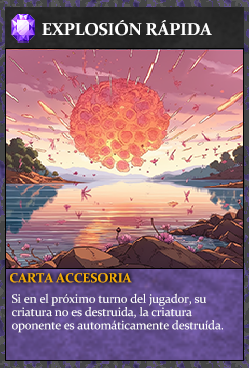
<style>
.page{position:relative;width:249px;height:368px}
.page>*{position:absolute;margin:0}
.t1{font:17.3px "Constantia-Bold";letter-spacing:-0.02em;color:#ffffff}
.t2{font:13.3px "Constantia-Bold";letter-spacing:-0.02em;color:#f2ac05}
.t3{font:12.3px/13.3px "Constantia";letter-spacing:-0.02em;color:#ffffff}
</style>
<div class="page">
<p class="t1" style="left:42px;top:20px;width:170px;height:16px">EXPLOSIÓN RÁPIDA</p>
<p class="t2" style="left:10px;top:273px;width:122px;height:10px">CARTA ACCESORIA</p>
<p class="t3" style="left:12px;top:293px;width:211px;height:40px">Si en el próximo turno del jugador, su<br>criatura no es destruida, la criatura <br>oponente es automáticamente destruída.</p>
</div>
